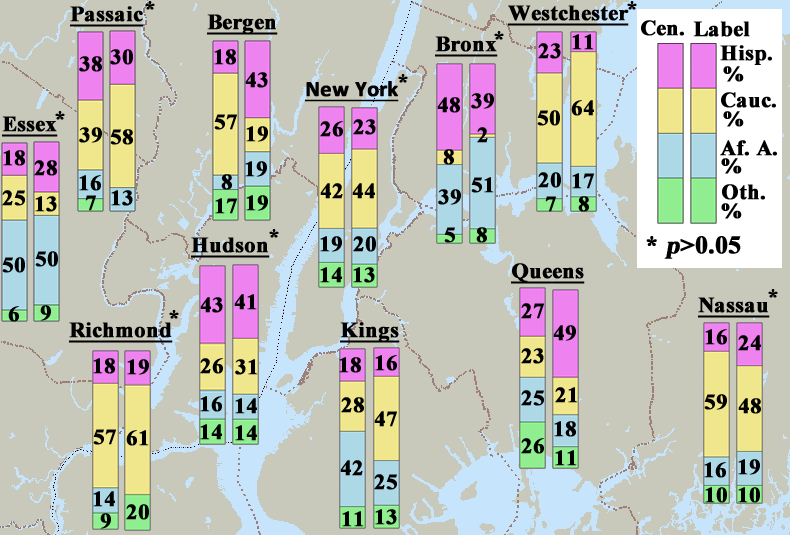
<style>
.page{position:relative;width:790px;height:535px;background:#c8c9bb}
.page>*{position:absolute;margin:0}
.t1{font:22px "TimesNewRomanPS-BoldMT";color:#000000;font-weight:bold;text-decoration:underline}
.t2{font:22px "TimesNewRomanPS-BoldMT";color:#000000;font-weight:bold}
.t3{font:22px "Calibri-Bold";color:#000000;font-weight:bold;text-decoration:underline}
.t4{font:25px "TimesNewRomanPS-BoldMT";color:#000000;font-weight:bold}
.t5{font:25px "TimesNewRomanPS-BoldMT";color:#000000;font-weight:bold;font-style:italic}
</style>
<div class="page">
<p class="t1" style="left:70px;top:6px;width:74px;height:21px">Passaic</p>
<p class="t2" style="left:145px;top:1px;width:10px;height:9px">*</p>
<p class="t1" style="left:508px;top:5px;width:121px;height:21px">Westchester</p>
<p class="t2" style="left:627px;top:1px;width:10px;height:9px">*</p>
<p class="t1" style="left:207px;top:14px;width:71px;height:21px">Bergen</p>
<p class="t2" style="left:641px;top:20px;width:43px;height:16px">Cen.</p>
<p class="t2" style="left:693px;top:21px;width:57px;height:16px">Label</p>
<p class="t1" style="left:435px;top:36px;width:63px;height:21px">Bronx</p>
<p class="t2" style="left:494px;top:31px;width:10px;height:9px">*</p>
<p class="t2" style="left:572px;top:34px;width:22px;height:16px">11</p>
<p class="t2" style="left:110px;top:49px;width:23px;height:16px">30</p>
<p class="t2" style="left:214px;top:49px;width:22px;height:16px">18</p>
<p class="t2" style="left:538px;top:43px;width:23px;height:16px">23</p>
<p class="t2" style="left:720px;top:45px;width:52px;height:20px">Hisp.</p>
<p class="t2" style="left:79px;top:56px;width:23px;height:16px">38</p>
<p class="t2" style="left:245px;top:72px;width:23px;height:16px">43</p>
<p class="t2" style="left:398px;top:74px;width:10px;height:9px">*</p>
<p class="t2" style="left:723px;top:66px;width:21px;height:16px">%</p>
<p class="t3" style="left:305px;top:81px;width:94px;height:21px">New York</p>
<p class="t2" style="left:437px;top:97px;width:23px;height:16px">48</p>
<p class="t2" style="left:471px;top:93px;width:23px;height:16px">39</p>
<p class="t2" style="left:571px;top:100px;width:23px;height:16px">64</p>
<p class="t2" style="left:721px;top:92px;width:55px;height:16px">Cauc.</p>
<p class="t2" style="left:55px;top:111px;width:10px;height:9px">*</p>
<p class="t2" style="left:537px;top:110px;width:23px;height:16px">50</p>
<p class="t2" style="left:723px;top:111px;width:21px;height:16px">%</p>
<p class="t1" style="left:2px;top:116px;width:56px;height:21px">Essex</p>
<p class="t2" style="left:214px;top:114px;width:23px;height:16px">57</p>
<p class="t2" style="left:246px;top:126px;width:22px;height:16px">19</p>
<p class="t2" style="left:320px;top:121px;width:23px;height:16px">26</p>
<p class="t2" style="left:353px;top:119px;width:23px;height:16px">23</p>
<p class="t2" style="left:79px;top:127px;width:23px;height:16px">39</p>
<p class="t2" style="left:110px;top:129px;width:23px;height:16px">58</p>
<p class="t2" style="left:477px;top:127px;width:11px;height:16px">2</p>
<p class="t2" style="left:3px;top:150px;width:22px;height:16px">18</p>
<p class="t2" style="left:443px;top:149px;width:11px;height:16px">8</p>
<p class="t2" style="left:720px;top:140px;width:57px;height:16px">Af. A.</p>
<p class="t2" style="left:34px;top:160px;width:23px;height:16px">28</p>
<p class="t2" style="left:245px;top:161px;width:22px;height:16px">19</p>
<p class="t2" style="left:721px;top:158px;width:21px;height:16px">%</p>
<p class="t2" style="left:221px;top:174px;width:11px;height:16px">8</p>
<p class="t2" style="left:538px;top:172px;width:23px;height:16px">20</p>
<p class="t2" style="left:572px;top:173px;width:22px;height:16px">17</p>
<p class="t2" style="left:79px;top:175px;width:22px;height:16px">16</p>
<p class="t2" style="left:320px;top:183px;width:23px;height:16px">42</p>
<p class="t2" style="left:352px;top:183px;width:23px;height:16px">44</p>
<p class="t2" style="left:471px;top:177px;width:23px;height:16px">51</p>
<p class="t2" style="left:722px;top:184px;width:43px;height:16px">Oth.</p>
<p class="t2" style="left:2px;top:190px;width:23px;height:16px">25</p>
<p class="t2" style="left:35px;top:196px;width:22px;height:16px">13</p>
<p class="t2" style="left:85px;top:195px;width:11px;height:16px">7</p>
<p class="t2" style="left:111px;top:190px;width:22px;height:16px">13</p>
<p class="t2" style="left:215px;top:198px;width:22px;height:16px">17</p>
<p class="t2" style="left:246px;top:195px;width:22px;height:16px">19</p>
<p class="t2" style="left:438px;top:189px;width:23px;height:16px">39</p>
<p class="t2" style="left:545px;top:196px;width:11px;height:16px">7</p>
<p class="t2" style="left:578px;top:196px;width:11px;height:16px">8</p>
<p class="t2" style="left:721px;top:203px;width:21px;height:16px">%</p>
<p class="t2" style="left:269px;top:229px;width:10px;height:9px">*</p>
<p class="t2" style="left:444px;top:227px;width:11px;height:16px">5</p>
<p class="t2" style="left:476px;top:227px;width:11px;height:16px">8</p>
<p class="t1" style="left:191px;top:237px;width:79px;height:21px">Hudson</p>
<p class="t2" style="left:320px;top:236px;width:22px;height:16px">19</p>
<p class="t2" style="left:353px;top:236px;width:23px;height:16px">20</p>
<p class="t4" style="left:646px;top:236px;width:95px;height:23px">*<span class="t5"> p</span>&gt;0.05</p>
<p class="t2" style="left:2px;top:257px;width:23px;height:16px">50</p>
<p class="t2" style="left:35px;top:251px;width:23px;height:16px">50</p>
<p class="t2" style="left:320px;top:267px;width:22px;height:16px">14</p>
<p class="t2" style="left:353px;top:267px;width:22px;height:16px">13</p>
<p class="t1" style="left:511px;top:263px;width:74px;height:21px">Queens</p>
<p class="t2" style="left:234px;top:294px;width:23px;height:16px">41</p>
<p class="t2" style="left:768px;top:289px;width:10px;height:9px">*</p>
<p class="t2" style="left:40px;top:305px;width:11px;height:16px">9</p>
<p class="t2" style="left:200px;top:297px;width:23px;height:16px">43</p>
<p class="t2" style="left:521px;top:303px;width:23px;height:16px">27</p>
<p class="t1" style="left:698px;top:297px;width:72px;height:21px">Nassau</p>
<p class="t2" style="left:8px;top:306px;width:11px;height:16px">6</p>
<p class="t2" style="left:169px;top:310px;width:10px;height:9px">*</p>
<p class="t1" style="left:69px;top:322px;width:104px;height:21px">Richmond</p>
<p class="t1" style="left:340px;top:322px;width:60px;height:21px">Kings</p>
<p class="t2" style="left:553px;top:325px;width:23px;height:16px">49</p>
<p class="t2" style="left:705px;top:329px;width:22px;height:16px">16</p>
<p class="t2" style="left:738px;top:335px;width:23px;height:16px">24</p>
<p class="t2" style="left:521px;top:348px;width:23px;height:16px">23</p>
<p class="t2" style="left:93px;top:358px;width:22px;height:16px">18</p>
<p class="t2" style="left:127px;top:359px;width:22px;height:16px">19</p>
<p class="t2" style="left:200px;top:358px;width:23px;height:16px">26</p>
<p class="t2" style="left:235px;top:359px;width:23px;height:16px">31</p>
<p class="t2" style="left:339px;top:357px;width:22px;height:16px">18</p>
<p class="t2" style="left:375px;top:355px;width:22px;height:16px">16</p>
<p class="t2" style="left:521px;top:390px;width:23px;height:16px">25</p>
<p class="t2" style="left:555px;top:387px;width:23px;height:16px">21</p>
<p class="t2" style="left:200px;top:396px;width:22px;height:16px">16</p>
<p class="t2" style="left:235px;top:398px;width:22px;height:16px">14</p>
<p class="t2" style="left:341px;top:397px;width:23px;height:16px">28</p>
<p class="t2" style="left:704px;top:394px;width:23px;height:16px">59</p>
<p class="t2" style="left:738px;top:398px;width:23px;height:16px">48</p>
<p class="t2" style="left:374px;top:411px;width:23px;height:16px">47</p>
<p class="t2" style="left:200px;top:424px;width:22px;height:16px">14</p>
<p class="t2" style="left:235px;top:425px;width:22px;height:16px">14</p>
<p class="t2" style="left:554px;top:421px;width:22px;height:16px">18</p>
<p class="t2" style="left:93px;top:429px;width:23px;height:16px">57</p>
<p class="t2" style="left:126px;top:430px;width:23px;height:16px">61</p>
<p class="t2" style="left:521px;top:438px;width:23px;height:16px">26</p>
<p class="t2" style="left:340px;top:460px;width:23px;height:16px">42</p>
<p class="t2" style="left:555px;top:450px;width:22px;height:16px">11</p>
<p class="t2" style="left:704px;top:462px;width:22px;height:16px">16</p>
<p class="t2" style="left:738px;top:459px;width:22px;height:16px">19</p>
<p class="t2" style="left:374px;top:474px;width:23px;height:16px">25</p>
<p class="t2" style="left:93px;top:491px;width:22px;height:16px">14</p>
<p class="t2" style="left:705px;top:487px;width:22px;height:16px">10</p>
<p class="t2" style="left:738px;top:487px;width:22px;height:16px">10</p>
<p class="t2" style="left:126px;top:504px;width:23px;height:16px">20</p>
<p class="t2" style="left:375px;top:509px;width:22px;height:16px">13</p>
<p class="t2" style="left:100px;top:513px;width:11px;height:16px">9</p>
<p class="t2" style="left:342px;top:511px;width:22px;height:16px">11</p>
</div>
